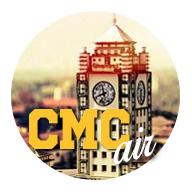
<style>
.page{position:relative;width:192px;height:192px;background:#ffffff}
.page>*{position:absolute;margin:0}
.t1{font:40.3px "UniversityRegular";color:#fbc42f}
.t2{font:47.3px "BirdsofParadise";color:#ffffff}
</style>
<div class="page">
<p class="t1" style="left:29px;top:109px;width:101px;height:40px">CMC</p>
<p class="t2" style="left:113px;top:127px;width:44px;height:38px;rotate:-15deg">air</p>
</div>
